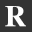
<style>
.page{position:relative;width:32px;height:32px;background:#333333}
.page>*{position:absolute;margin:0}
.t1{font:30px "STIXGeneral-Bold";letter-spacing:0.025em;color:#fefefe}
</style>
<div class="page">
<p class="t1" style="left:5px;top:6px;width:21px;height:21px">R</p>
</div>
